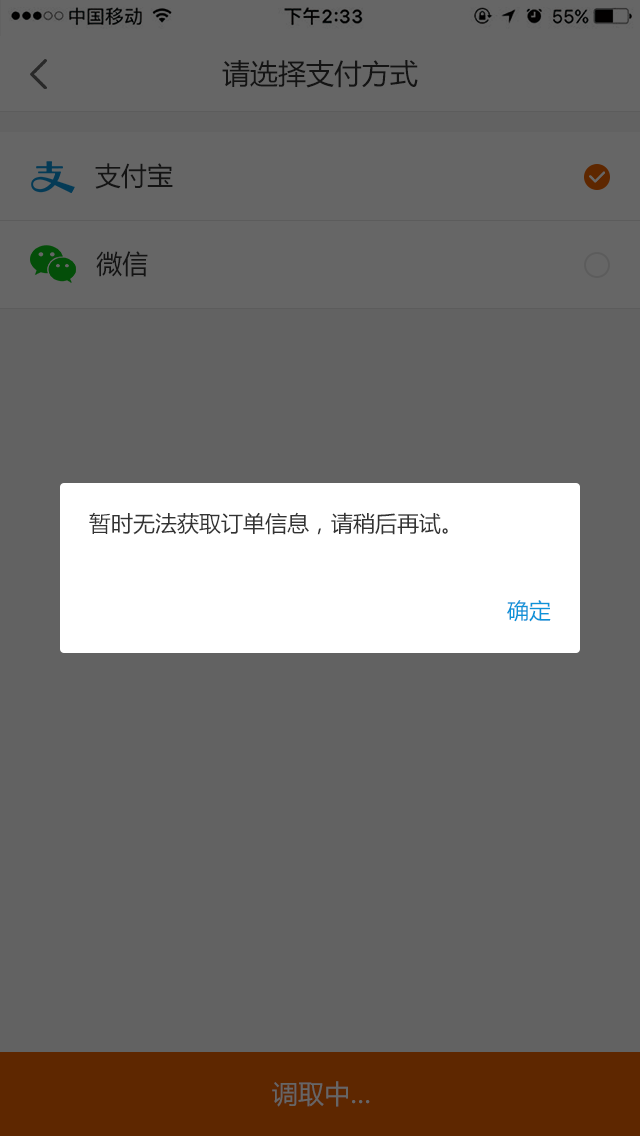
<style>
.page{position:relative;width:640px;height:1136px;background:#626262}
.page>*{position:absolute;margin:0}
.t1{font:28px "MicrosoftYaHei";color:#141414}
.t2{font:26px "MicrosoftYaHei";color:#141414}
.t3{font:22px "MicrosoftYaHei";color:#333333}
.t4{font:22px "MicrosoftYaHei";color:#0d93d8}
.t5{font:26px "MicrosoftYaHei";color:#666666}
</style>
<div class="page">
<p class="t1" style="left:222px;top:60px;width:196px;height:28px">请选择支付方式</p>
<p class="t2" style="left:95px;top:163px;width:78px;height:26px">支付宝</p>
<p class="t2" style="left:96px;top:251px;width:52px;height:26px">微信</p>
<p class="t3" style="left:89px;top:512px;width:359px;height:23px">暂时无法获取订单信息，请稍后再试。</p>
<p class="t4" style="left:507px;top:600px;width:44px;height:22px">确定</p>
<p class="t5" style="left:272px;top:1081px;width:98px;height:26px">调取中…</p>
</div>
